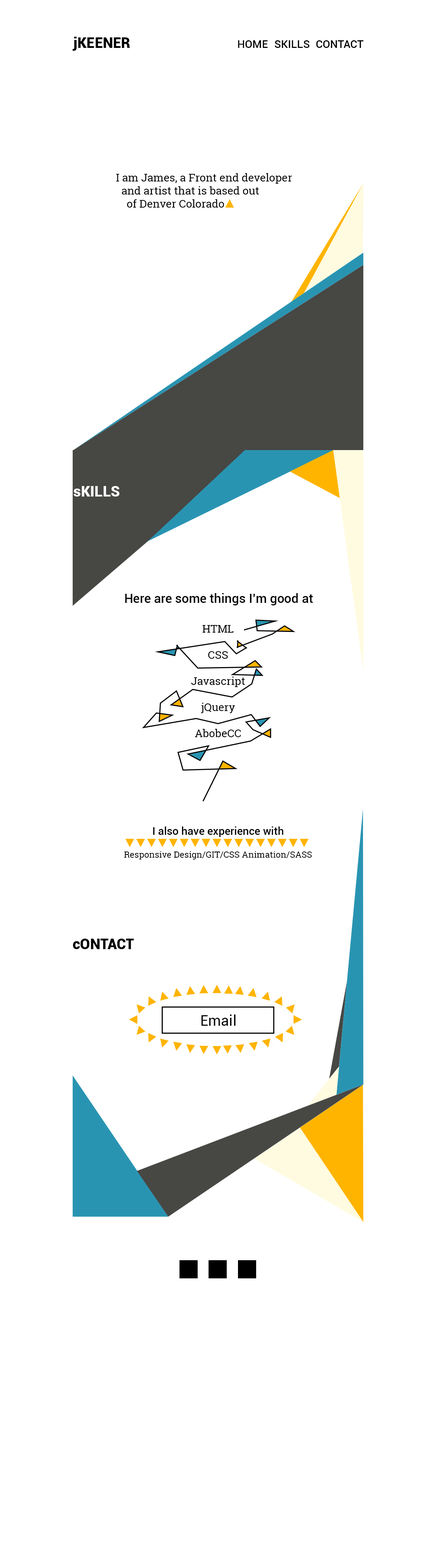
<style>
.page{position:relative;width:436px;height:1568px;background:#ffffff}
.page>*{position:absolute;margin:0}
.t1{font:14.5px "Roboto-Black";color:#000000}
.t2{font:10.9px "Roboto-Medium";color:#000000}
.t3{font:10.9px "RobotoSlab-Regular";color:#000000}
.t4{font:14.5px "Roboto-Black";color:#ffffff}
.t5{font:12.7px "Roboto-Medium";color:#000000}
.t6{font:8.7px "RobotoSlab-Regular";color:#000000}
.t7{font:14.5px "Roboto-Regular";color:#000000}
</style>
<div class="page">
<p class="t1" style="left:72px;top:37px;width:58px;height:14px">jKEENER</p>
<p class="t2" style="left:238px;top:40px;width:30px;height:8px">HOME</p>
<p class="t2" style="left:274px;top:40px;width:35px;height:8px">SKILLS</p>
<p class="t2" style="left:316px;top:40px;width:47px;height:8px">CONTACT</p>
<p class="t3" style="left:116px;top:173px;width:176px;height:35px">I am James, a Front end developer<br>  and artist that is based out <br>    of Denver Colorado</p>
<p class="t4" style="left:73px;top:486px;width:46px;height:11px">sKILLS</p>
<p class="t5" style="left:125px;top:593px;width:188px;height:12px">Here are some things I’m good at</p>
<p class="t3" style="left:191px;top:625px;width:54px;height:112px;text-align:center">HTML<br><br>CSS<br><br>Javascript<br><br>jQuery<br><br>AbobeCC</p>
<p class="t2" style="left:153px;top:826px;width:130px;height:11px">I also have experience with</p>
<p class="t6" style="left:124px;top:851px;width:187px;height:8px">Responsive Design/GIT/CSS Animation/SASS</p>
<p class="t1" style="left:73px;top:939px;width:61px;height:10px">cONTACT</p>
<p class="t7" style="left:201px;top:1014px;width:34px;height:12px">Email</p>
</div>
